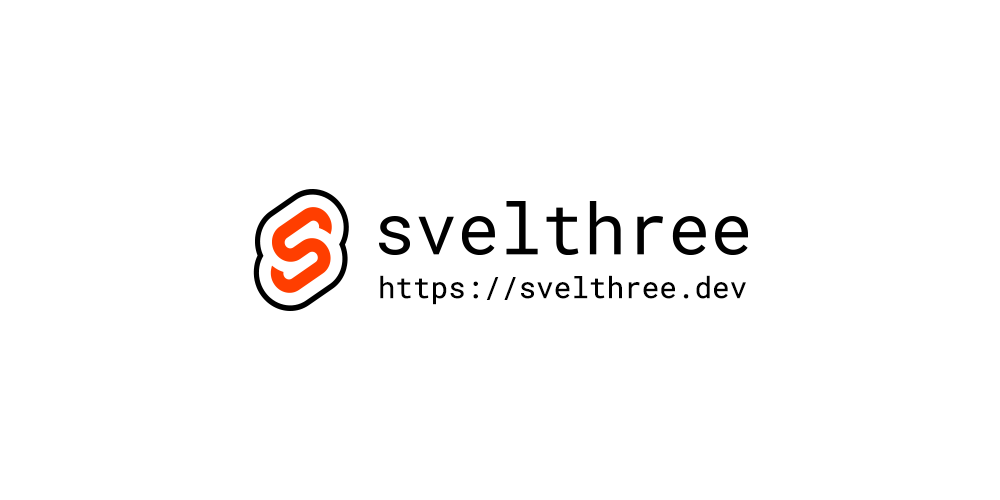
<style>
.page{position:relative;width:1000px;height:500px;background:#ffffff}
.page>*{position:absolute;margin:0}
.t1{font:29px "RobotoMono-Regular";letter-spacing:-0.02em;color:#000000;font-weight:bold}
</style>
<div class="page">
<p class="t1" style="left:380px;top:275px;width:366px;height:30px">https://svelthree.dev</p>
</div>
